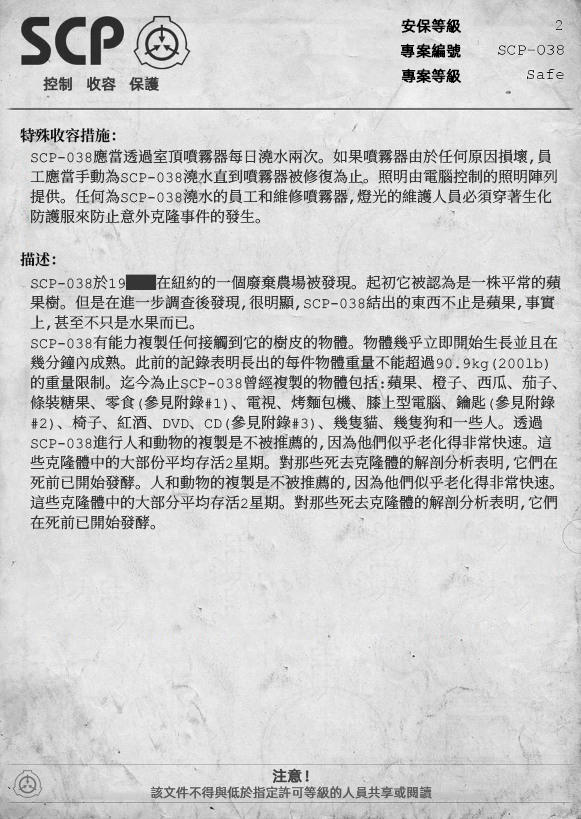
<style>
.page{position:relative;width:581px;height:819px}
.page>*{position:absolute;margin:0}
.t1{font:15px "AlibabaPuHuiTiR";color:#000000;font-weight:bold}
.t2{font:15px "AlibabaPuHuiTiR";color:#3d3d3d;font-weight:bold}
.t3{font:15px "ContainmentBreach-Bold";color:#121212}
.t4{font:15px/20px "ContainmentBreach-Regular";color:#353535}
.t5{font:15px "AlibabaPuHuiTiR";color:#414141;font-weight:bold}
.t6{font:13px "AlibabaPuHuiTiR";color:#575757}
</style>
<div class="page">
<p class="t1" style="left:401px;top:18px;width:60px;height:15px">安保等級</p>
<p class="t1" style="left:400px;top:43px;width:61px;height:15px">專案編號</p>
<p class="t2" style="left:43px;top:76px;width:116px;height:15px">控制   收容   保護</p>
<p class="t1" style="left:401px;top:68px;width:60px;height:15px">專案等級</p>
<p class="t3" style="left:20px;top:128px;width:96px;height:15px">特殊收容措施：</p>
<p class="t4" style="left:30px;top:149px;width:528px;height:75px">SCP-038應當透過室頂噴霧器每日澆水兩次。如果噴霧器由於任何原因損壞，員<br>工應當手動為SCP-038澆水直到噴霧器被修復為止。照明由電腦控制的照明陣列<br>提供。任何為SCP-038澆水的員工和維修噴霧器，燈光的維護人員必須穿著生化<br>防護服來防止意外克隆事件的發生。</p>
<p class="t3" style="left:20px;top:252px;width:36px;height:15px">描述：</p>
<p class="t4" style="left:30px;top:274px;width:531px;height:256px">SCP-038於19██在紐約的一個廢棄農場被發現。起初它被認為是一株平常的蘋<br>果樹。但是在進一步調查後發現，很明顯，SCP-038結出的東西不止是蘋果，事實<br>上，甚至不只是水果而已。<br>SCP-038有能力複製任何接觸到它的樹皮的物體。物體幾乎立即開始生長並且在<br>幾分鐘內成熟。此前的記錄表明長出的每件物體重量不能超過90.9kg（200lb） <br>的重量限制。迄今為止SCP-038曾經複製的物體包括：蘋果、橙子、西瓜、茄子、<br>條裝糖果、零食（參見附錄#1）、電視、烤麵包機、膝上型電腦、鑰匙（參見附錄<br>#2）、椅子、紅酒、DVD、CD（參見附錄#3）、幾隻貓、幾隻狗和一些人。透過<br>SCP-038進行人和動物的複製是不被推薦的，因為他們似乎老化得非常快速。這<br>些克隆體中的大部份平均存活2星期。對那些死去克隆體的解剖分析表明，它們在<br>死前已開始發酵。人和動物的複製是不被推薦的，因為他們似乎老化得非常快速。<br>這些克隆體中的大部分平均存活2星期。對那些死去克隆體的解剖分析表明，它們<br>在死前已開始發酵。</p>
<p class="t5" style="left:272px;top:768px;width:37px;height:15px">注意！</p>
<p class="t6" style="left:151px;top:786px;width:281px;height:13px">該文件不得與低於指定許可等級的人員共享或閱讀</p>
</div>
